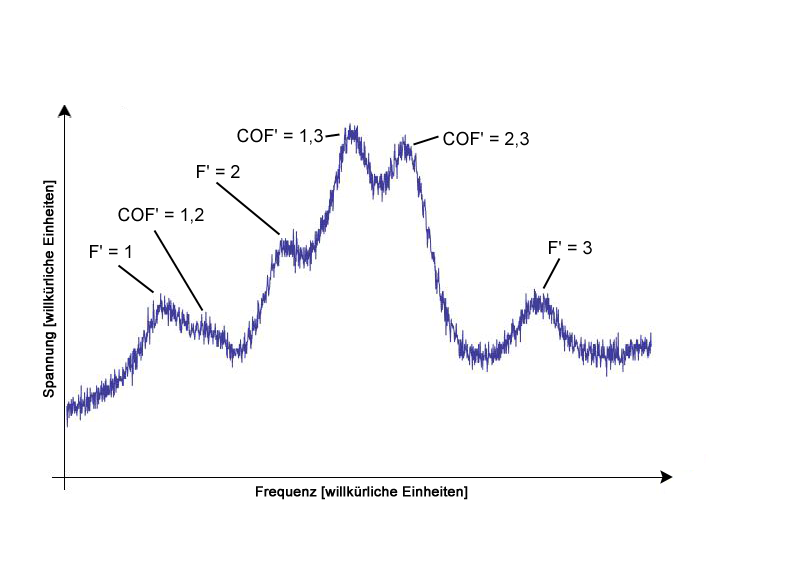
<style>
.page{position:relative;width:800px;height:567px;background:#ffffff}
.page>*{position:absolute;margin:0}
.t1{font:18px "ArialMT";color:#000000}
.t2{font:14px "ArialMT";color:#000000;font-weight:bold}
</style>
<div class="page">
<p class="t1" style="left:237px;top:128px;width:86px;height:17px">COF' = 1,3</p>
<p class="t1" style="left:443px;top:131px;width:86px;height:17px">COF' = 2,3</p>
<p class="t1" style="left:197px;top:165px;width:43px;height:13px">F' = 2</p>
<p class="t2" style="left:43px;top:180px;width:14px;height:218px;rotate:-90deg">Spannung [willkürliche Einheiten]</p>
<p class="t1" style="left:118px;top:207px;width:86px;height:17px">COF' = 1,2</p>
<p class="t1" style="left:90px;top:245px;width:41px;height:13px">F' = 1</p>
<p class="t1" style="left:549px;top:241px;width:43px;height:14px">F' = 3</p>
<p class="t2" style="left:256px;top:486px;width:212px;height:14px">Frequenz [willkürliche Einheiten]</p>
</div>
